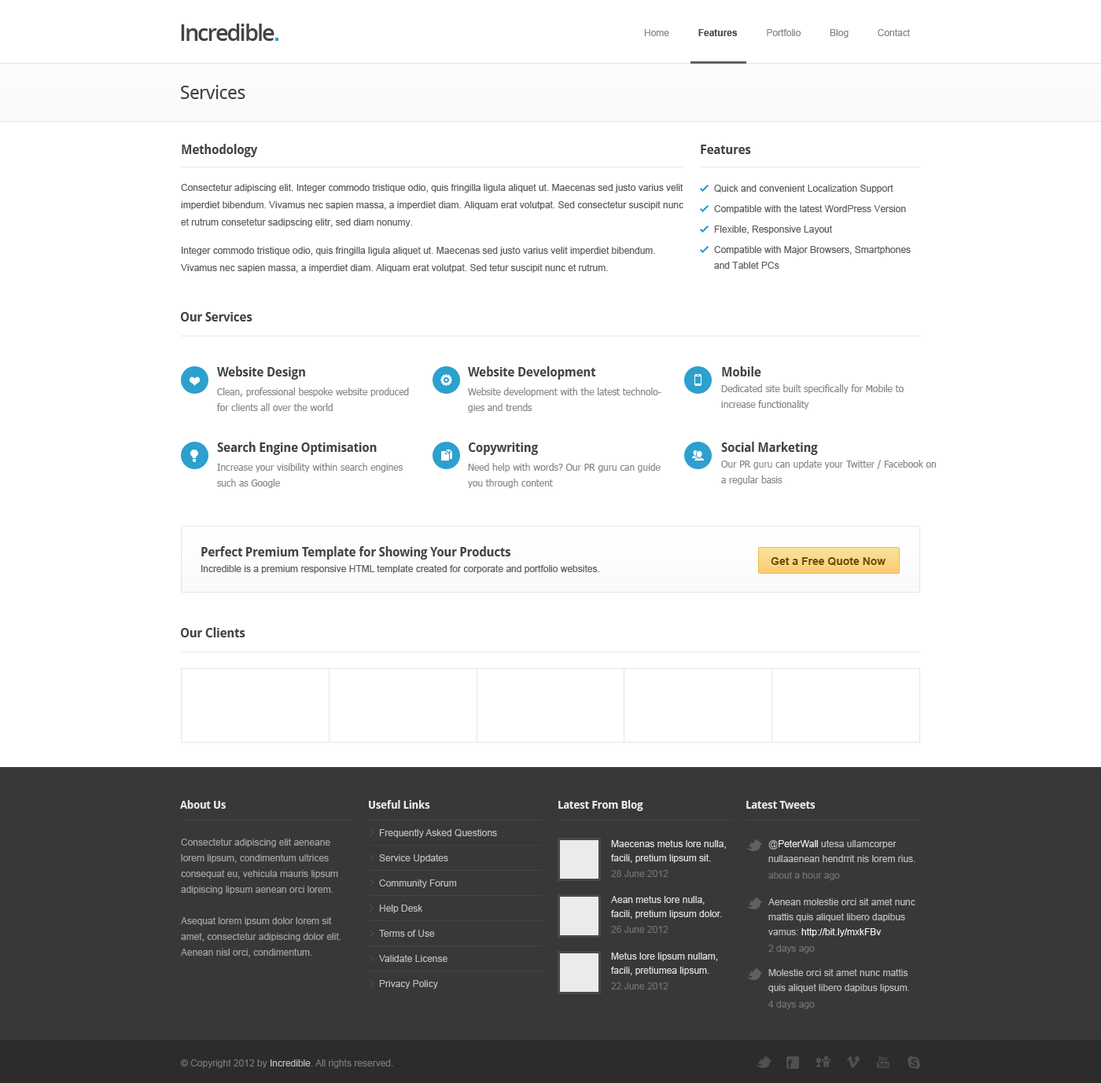
<style>
.page{position:relative;width:1101px;height:1083px;background:#ffffff}
.page>*{position:absolute;margin:0}
.t1{font:22.8px "OpenSans-Semibold";letter-spacing:-0.07em;color:#444444}
.t2{font:9.4px "ArialMT";color:#888888}
.t3{font:9.4px "Arial-BoldMT";color:#444444}
.t4{font:18.9px "DroidSans";letter-spacing:-0.025em;color:#444444}
.t5{font:9.4px/17.3px "ArialMT";color:#606060}
.t6{font:12.6px/16.5px "DroidSans-Bold";letter-spacing:-0.025em;color:#444444}
.t7{font:9.4px/20.4px "ArialMT";color:#606060}
.t8{font:9.4px/16.5px "ArialMT";color:#606060}
.t9{font:12.6px "DroidSans-Bold";letter-spacing:-0.025em;color:#444444}
.t10{font:9.4px/15.7px "ArialMT";color:#606060}
.t11{font:9.4px/18.9px "Tahoma";color:#888888}
.t12{font:12.6px/15.7px "DroidSans-Bold";letter-spacing:-0.025em;color:#444444}
.t13{font:9.4px/15.7px "Tahoma";color:#888888}
.t14{font:12.6px/12.6px "DroidSans-Bold";letter-spacing:-0.025em;color:#444444}
.t15{font:11px "Arial-BoldMT";color:#754c00}
.t16{font:11px "DroidSans-Bold";letter-spacing:-0.025em;color:#ffffff}
.t17{font:9.4px/25.2px "ArialMT";color:#bbbbbb}
.t18{font:9.4px/15.7px "ArialMT";color:#a1a1a1}
.t19{font:9.4px/14.2px "ArialMT";color:#dddddd}
.t20{font:9.4px/15.7px "ArialMT";color:#707070}
.t21{font:9.4px/14.9px "ArialMT";color:#bbbbbb}
.t22{font:9.4px/14.9px "ArialMT";color:#eeeeee}
.t23{font:9.4px/16.5px "ArialMT";color:#707070}
.t24{font:9.4px/14.9px "ArialMT";color:#aaaaaa}
.t25{font:9.4px "ArialMT";color:#777777}
.t26{font:9.4px "ArialMT";color:#bbbbbb}
</style>
<div class="page">
<p class="t1" style="left:181px;top:24px;width:93px;height:17px">Incredible</p>
<p class="t2" style="left:644px;top:29px;width:266px;height:9px">Home           <span class="t3">Features           </span>Portfolio           Blog           Contact</p>
<p class="t4" style="left:181px;top:85px;width:64px;height:14px">Services</p>
<p class="t5" style="left:181px;top:144px;width:502px;height:129px"><span class="t6">Methodology<br><br></span><span class="t7">Consectetur adipiscing elit. Integer commodo tristique odio, quis fringilla ligula aliquet ut. </span><span class="t8">Maecenas </span>sed justo varius velit imperdiet bibendum. Vivamus nec sapien massa, a imperdiet diam. Aliquam erat volutpat. Sed consectetur suscipit nunc et rutrum consetetur sadipscing elitr, sed diam nonumy.<br> <br>Integer commodo tristique odio, quis fringilla ligula aliquet ut. Maecenas sed justo varius velit imperdiet bibendum. Vivamus nec sapien massa, a imperdiet diam. Aliquam erat volutpat. Sed tetur suscipit nunc et rutrum.</p>
<p class="t9" style="left:700px;top:145px;width:51px;height:9px">Features</p>
<p class="t7" style="left:714px;top:185px;width:196px;height:84px">Quick and convenient Localization Support<br>Compatible with the latest WordPress Version<br>Flexible, Responsive Layout<br>Compatible with Major Browsers, Smartphones <br><span class="t10">and Tablet PCs</span></p>
<p class="t9" style="left:181px;top:312px;width:71px;height:10px">Our Services</p>
<p class="t11" style="left:217px;top:366px;width:192px;height:45px"><span class="t12">Website Design<br></span>Clean, professional bespoke website produced <span class="t13">for clients all over the world</span></p>
<p class="t11" style="left:468px;top:366px;width:193px;height:47px"><span class="t12">Website Development<br></span>Website development with the latest technolo<span class="t13">gies and trends</span></p>
<p class="t13" style="left:721px;top:366px;width:182px;height:44px"><span class="t12">Mobile<br></span>Dedicated site built specifically for Mobile to increase functionality</p>
<p class="t11" style="left:217px;top:442px;width:186px;height:46px"><span class="t12">Search Engine Optimisation<br></span>Increase your visibility within search engines <span class="t13">such as Google</span></p>
<p class="t11" style="left:468px;top:443px;width:192px;height:45px"><span class="t12">Copywriting<br></span>Need help with words? Our PR guru can guide <span class="t13">you through content</span></p>
<p class="t13" style="left:721px;top:442px;width:215px;height:43px"><span class="t12">Social Marketing<br></span>Our PR guru can update your Twitter / Facebook on a regular basis</p>
<p class="t10" style="left:201px;top:546px;width:398px;height:28px"><span class="t14"><br>Perfect Premium Template for Showing Your Products<br></span>Incredible is a premium responsive HTML template created for corporate and portfolio websites.</p>
<p class="t15" style="left:770px;top:557px;width:115px;height:9px">Get a Free Quote Now</p>
<p class="t9" style="left:181px;top:627px;width:64px;height:11px">Our Clients</p>
<p class="t16" style="left:180px;top:800px;width:46px;height:9px;opacity:0.9">About Us</p>
<p class="t16" style="left:369px;top:800px;width:61px;height:9px;opacity:0.9">Useful Links</p>
<p class="t16" style="left:558px;top:800px;width:85px;height:11px;opacity:0.9">Latest From Blog</p>
<p class="t16" style="left:746px;top:801px;width:69px;height:8px;opacity:0.9">Latest Tweets</p>
<p class="t17" style="left:379px;top:829px;width:118px;height:160px">Frequently Asked Questions<br>Service Updates<br>Community Forum<br>Help Desk<br>Terms of Use<br>Validate License<br>Privacy Policy</p>
<p class="t18" style="left:181px;top:839px;width:160px;height:119px">Consectetur adipiscing elit aeneane lorem lipsum, condimentum ultrices consequat eu, vehicula mauris lipsum adipiscing lipsum aenean orci lorem.<br> <br>Asequat lorem ipsum dolor lorem sit amet, consectetur adipiscing dolor elit. Aenean nisl orci, condimentum.</p>
<p class="t19" style="left:611px;top:840px;width:115px;height:37px">Maecenas metus lore nulla, facili, pretium lipsum sit.<br><span class="t20">28 June 2012</span></p>
<p class="t21" style="left:768px;top:840px;width:147px;height:41px">@<span class="t22">PeterWall </span>utesa ullamcorper nullaaenean hendrrit nis lorem rius.<br><span class="t23">about a hour ago</span></p>
<p class="t19" style="left:611px;top:896px;width:111px;height:37px">Aean metus lore nulla, facili, pretium lipsum dolor.<br><span class="t20">26 June 2012</span></p>
<p class="t21" style="left:768px;top:899px;width:147px;height:55px">Aenean molestie orci sit amet nunc mattis quis aliquet libero dapibus vamus: <span class="t22">http://bit.ly/mxkFBv<br></span><span class="t23">2 days ago</span></p>
<p class="t19" style="left:611px;top:953px;width:107px;height:37px">Metus lore lipsum nullam, facili, pretiumea lipsum.<br><span class="t20">22 June 2012</span></p>
<p class="t21" style="left:768px;top:969px;width:142px;height:40px">Molestie orci sit amet nunc mattis quis aliquet libero dapibus lipsum<span class="t24">.<br></span><span class="t23">4 days ago</span></p>
<p class="t25" style="left:180px;top:1060px;width:213px;height:8px">© Copyright 2012 by <span class="t26">Incredible</span>. All rights reserved.</p>
</div>
